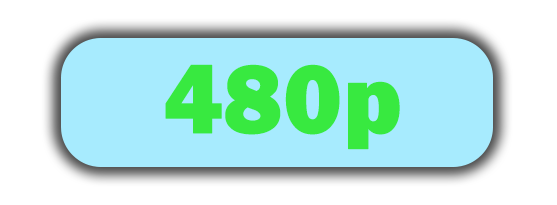
<style>
.page{position:relative;width:557px;height:205px;background:#a7ebfe}
.page>*{position:absolute;margin:0}
.t1{font:100px "FranklinGothic-Heavy";letter-spacing:-0.014em;color:#38e940;font-weight:bold}
</style>
<div class="page">
<p class="t1" style="left:165px;top:64px;width:235px;height:86px">480p</p>
</div>
